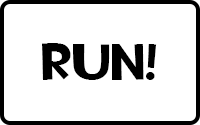
<style>
.page{position:relative;width:200px;height:125px;background:#ffffff}
.page>*{position:absolute;margin:0}
.t1{font:52px "TF2Build";color:#000000}
</style>
<div class="page">
<p class="t1" style="left:42px;top:43px;width:115px;height:37px">Run!</p>
</div>
